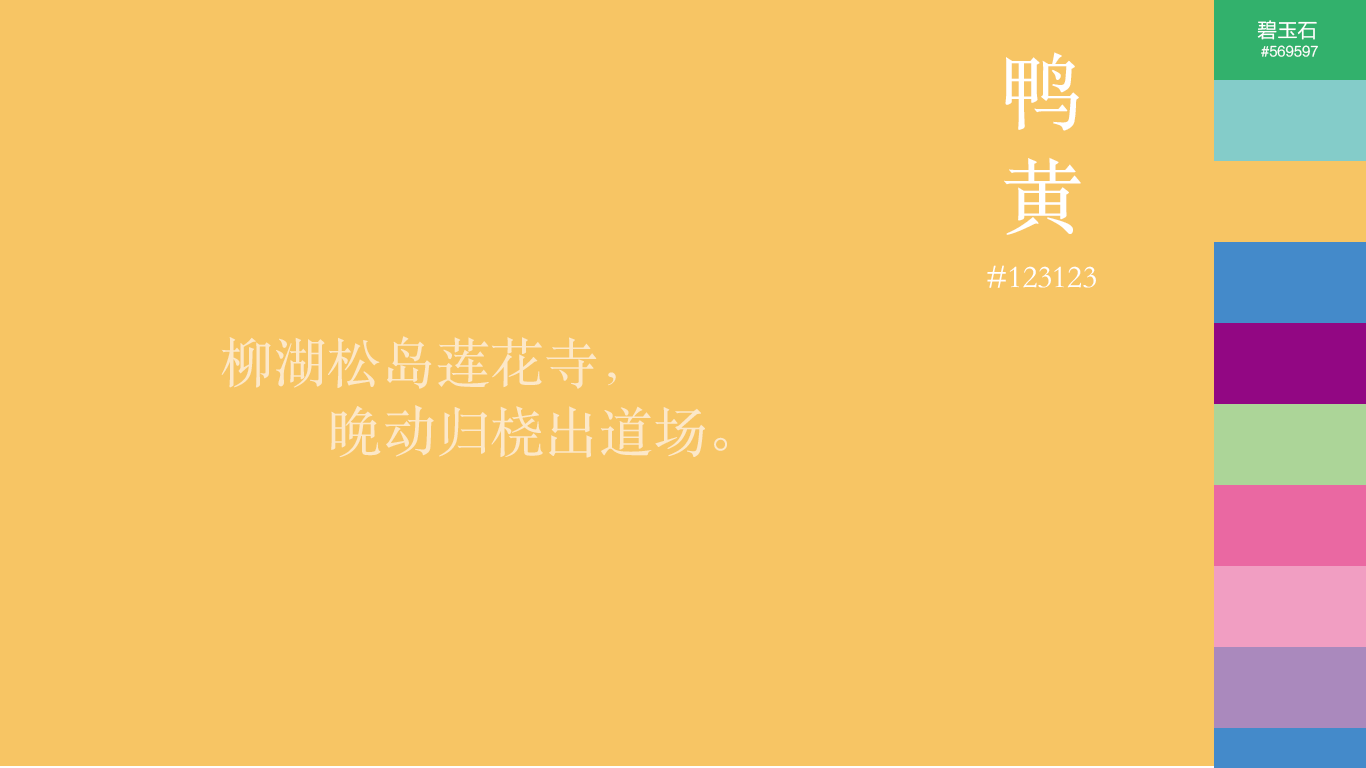
<style>
.page{position:relative;width:1366px;height:768px;background:#f7c564}
.page>*{position:absolute;margin:0}
.t1{font:20.2px "FZLTHK--GBK1-0";color:#ffffff}
.t2{font:82.2px/104.9px "STSongti-SC-Regular";color:#ffffff}
.t3{font:13.6px "FZLTHK--GBK1-0";color:#ffffff}
.t4{font:31.9px "STSongti-SC-Regular";color:#ffffff}
.t5{font:54.2px/69.2px "STSongti-SC-Regular";color:#fce8c9}
</style>
<div class="page">
<p class="t1" style="left:1257px;top:20px;width:60px;height:20px">碧玉石</p>
<p class="t2" style="left:1004px;top:52px;width:77px;height:183px">鸭<br>黄</p>
<p class="t3" style="left:1261px;top:45px;width:57px;height:12px">#569597</p>
<p class="t4" style="left:987px;top:265px;width:109px;height:23px">#123123</p>
<p class="t5" style="left:221px;top:336px;width:506px;height:122px">柳湖松岛莲花寺，<br>        晚动归桡出道场。</p>
</div>
